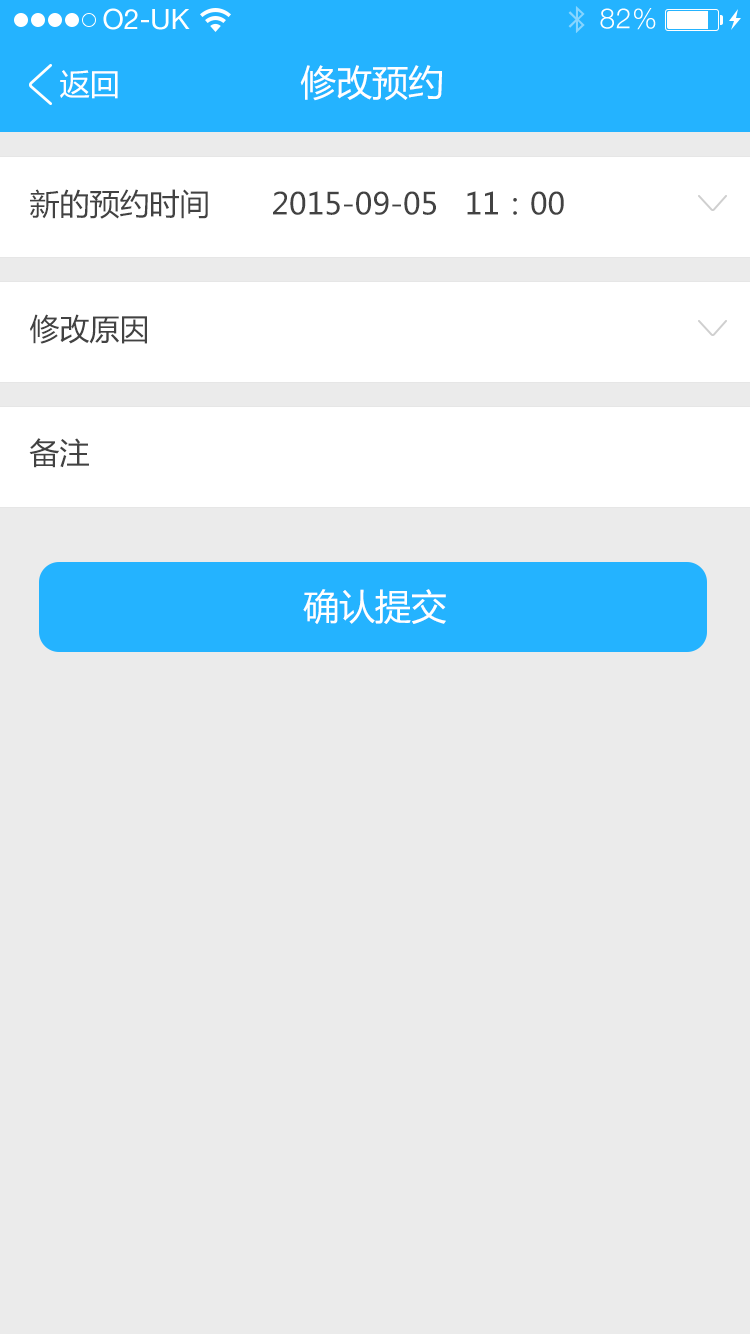
<style>
.page{position:relative;width:750px;height:1334px;background:#ebebeb}
.page>*{position:absolute;margin:0}
.t1{font:36px "MicrosoftYaHei";color:#ffffff}
.t2{font:30px "MicrosoftYaHei";color:#ffffff}
.t3{font:30px "MicrosoftYaHei";color:#424242}
</style>
<div class="page">
<p class="t1" style="left:300px;top:65px;width:142px;height:36px">修改预约</p>
<p class="t2" style="left:60px;top:70px;width:58px;height:29px">返回</p>
<p class="t3" style="left:30px;top:189px;width:534px;height:30px">新的预约时间       2015-09-05   11：00</p>
<p class="t3" style="left:30px;top:314px;width:117px;height:30px">修改原因</p>
<p class="t3" style="left:29px;top:438px;width:60px;height:30px">备注</p>
<p class="t1" style="left:303px;top:589px;width:143px;height:35px">确认提交</p>
</div>
